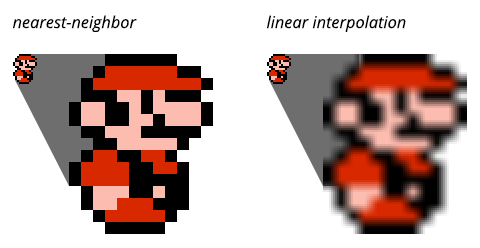
<style>
.page{position:relative;width:480px;height:248px;background:#ffffff}
.page>*{position:absolute;margin:0}
.t1{font:16.4px "OpenSans-Italic";color:#000000}
</style>
<div class="page">
<p class="t1" style="left:13px;top:15px;width:124px;height:17px">nearest-neighbor</p>
<p class="t1" style="left:266px;top:15px;width:140px;height:17px">linear interpolation</p>
</div>
